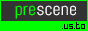
<style>
.page{position:relative;width:88px;height:31px;background:#333333}
.page>*{position:absolute;margin:0}
.t1{font:18px "Abel-Regular";color:#ffffff}
.t2{font:18px "Abel-Regular";color:#00ff00}
.t3{font:10px "HomespunTTBRK";color:#000000}
</style>
<div class="page">
<p class="t1" style="left:15px;top:5px;width:61px;height:14px"><span class="t2">pre</span>scene</p>
<p class="t3" style="left:62px;top:22px;width:23px;height:7px">.us.to</p>
</div>
